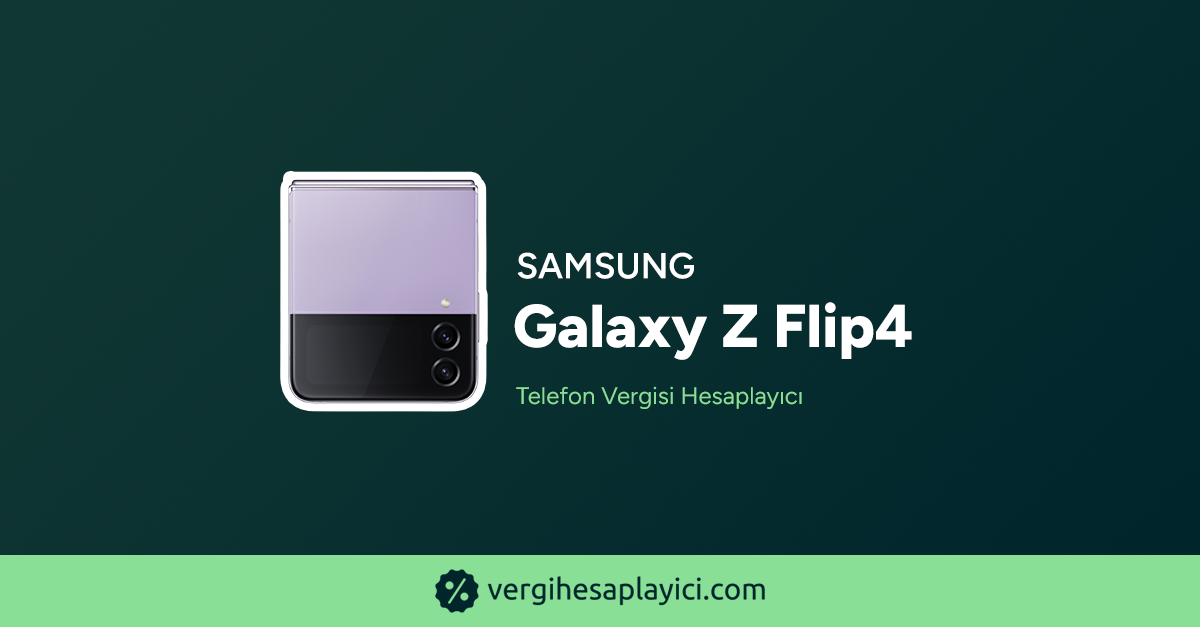
<style>
.page{position:relative;width:1200px;height:627px}
.page>*{position:absolute;margin:0}
.t1{font:36px "Figtree-SemiBold";color:#ffffff;text-transform:uppercase;font-weight:bold}
.t2{font:60.3px "Figtree-ExtraBold";color:#ffffff;font-weight:bold}
.t3{font:24px "Figtree-Regular";color:#88df95;font-weight:bold}
</style>
<div class="page">
<p class="t1" style="left:517px;top:252px;width:177px;height:27px">Samsung</p>
<p class="t2" style="left:514px;top:302px;width:398px;height:58px">Galaxy Z Flip4</p>
<p class="t3" style="left:516px;top:386px;width:286px;height:23px">Telefon Vergisi Hesaplayıcı</p>
</div>
